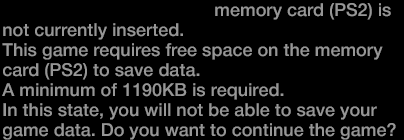
<style>
.page{position:relative;width:404px;height:140px;background:#000000}
.page>*{position:absolute;margin:0}
.t1{font:18px/20px "HelveticaNeue-Medium";color:#969696}
.t2{font:18px/20px "HelveticaNeue-Bold";color:#969696}
</style>
<div class="page">
<p class="t1" style="left:2px;top:3px;width:394px;height:137px"><span class="t2">MEMORY CARD SLOT 1</span> memory card (PS2) is<br>not currently inserted.<br>This game requires free space on the memory<br>card (PS2) to save data.<br>A minimum of 1190KB is required.<br>In this state, you will not be able to save your<br>game data. Do you want to continue the game?</p>
</div>
